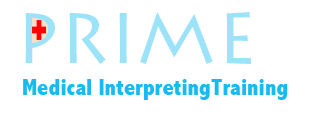
<style>
.page{position:relative;width:310px;height:120px;background:#ffffff}
.page>*{position:absolute;margin:0}
.t1{font:24px "AbadiMT-CondensedExtraBold";color:#16bbf1}
</style>
<div class="page">
<p class="t1" style="left:23px;top:79px;width:265px;height:21px">Medical InterpretingTraining</p>
</div>
